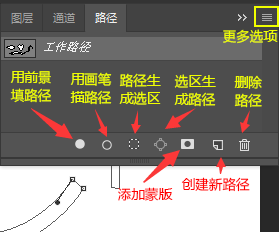
<style>
.page{position:relative;width:279px;height:232px;background:#ffffff}
.page>*{position:absolute;margin:0}
.t1{font:13.5px "MicrosoftYaHei";color:#f0ff00}
.t2{font:13.5px/18px "MicrosoftYaHei";color:#f0ff00}
.t3{font:13.5px "MicrosoftYaHei";color:#ff0000}
</style>
<div class="page">
<p class="t1" style="left:223px;top:29px;width:55px;height:15px">更多选项</p>
<p class="t2" style="left:10px;top:71px;width:42px;height:32px">用前景<br>填路径</p>
<p class="t2" style="left:70px;top:72px;width:42px;height:33px">用画笔<br>描路径</p>
<p class="t2" style="left:119px;top:73px;width:42px;height:32px">路径生<br>成选区</p>
<p class="t2" style="left:174px;top:74px;width:42px;height:33px">选区生<br>成路径</p>
<p class="t2" style="left:234px;top:75px;width:28px;height:33px">删除<br>路径</p>
<p class="t3" style="left:181px;top:177px;width:69px;height:15px">创建新路径</p>
<p class="t3" style="left:118px;top:187px;width:55px;height:14px">添加蒙版</p>
</div>
